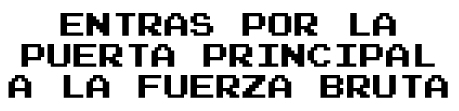
<style>
.page{position:relative;width:459px;height:111px;background:#ffffff}
.page>*{position:absolute;margin:0}
.t1{font:26px "PressStart2P";color:#000000}
</style>
<div class="page">
<p class="t1" style="left:8px;top:13px;width:440px;height:85px;text-align:center">ENTRAS POR LA<br>PUERTA PRINCIPAL<br>A LA FUERZA BRUTA</p>
</div>
